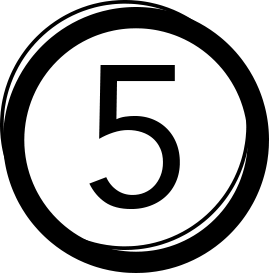
<style>
.page{position:relative;width:269px;height:273px;background:#ffffff}
.page>*{position:absolute;margin:0}
.t1{font:200px "Avenir-Roman";letter-spacing:-0.02em;color:#000000}
</style>
<div class="page">
<p class="t1" style="left:89px;top:65px;width:91px;height:144px">5</p>
</div>
